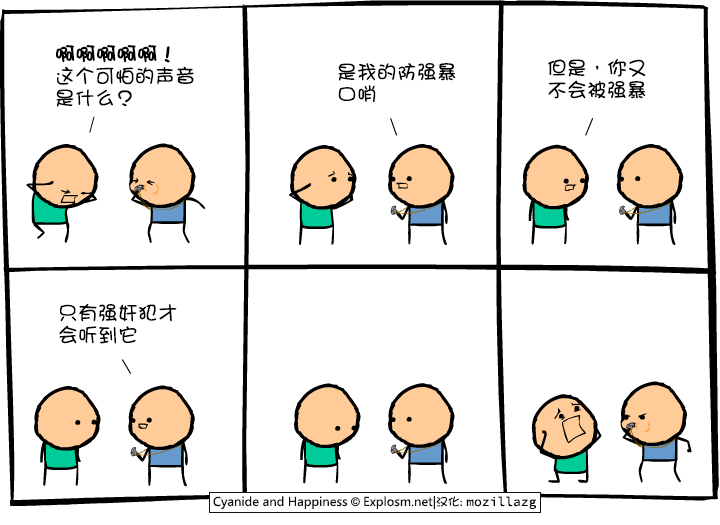
<style>
.page{position:relative;width:720px;height:525px;background:#ffffff}
.page>*{position:absolute;margin:0}
.t1{font:20px/22px "DFGirl";color:#000000}
.t2{font:20px/22px "DFGirl";color:#000000;font-weight:bold}
</style>
<div class="page">
<p class="t1" style="left:56px;top:45px;width:138px;height:62px"><span class="t2">啊啊啊啊啊！<br></span>这个可怕的声音<br>是什么？</p>
<p class="t1" style="left:338px;top:63px;width:118px;height:40px">是我的防强暴<br>口哨</p>
<p class="t1" style="left:548px;top:59px;width:98px;height:40px">但是，你又<br>不会被强暴</p>
<p class="t1" style="left:59px;top:303px;width:118px;height:41px">只有强奸犯才<br>会听到它</p>
</div>
